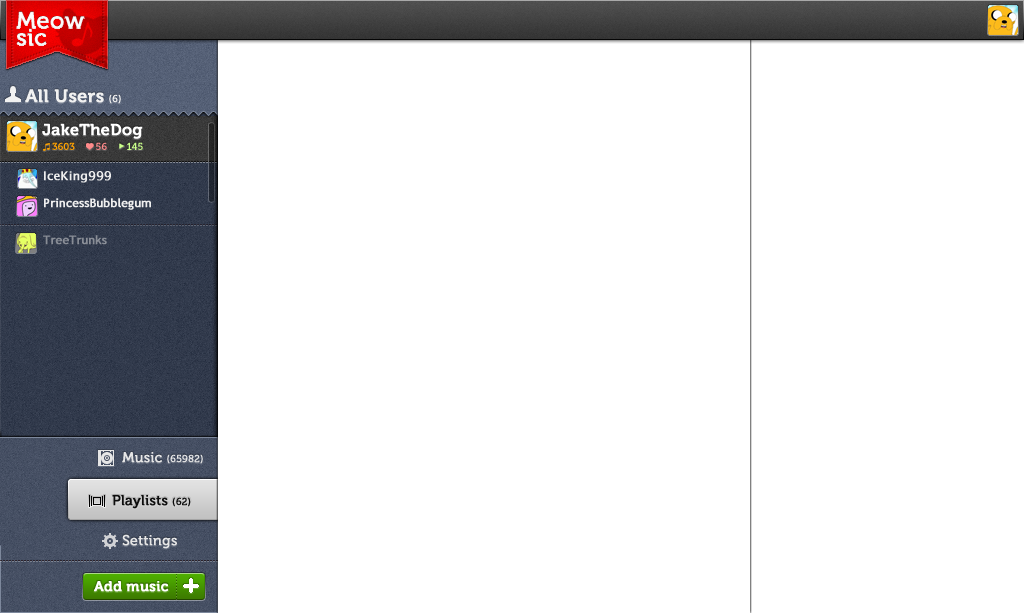
<style>
.page{position:relative;width:1024px;height:613px;background:#ffffff}
.page>*{position:absolute;margin:0}
.t1{font:23px/17px "Museo500-Regular";color:#f8f8f8;font-weight:bold}
.t2{font:18px "Museo700-Regular";color:#f1f1f1;font-weight:bold}
.t3{font:10px "Museo500-Regular";color:#f1f1f1;font-weight:bold}
.t4{font:16px "Museo700-Regular";color:#ffffff;font-weight:bold}
.t5{font:10px "Museo700-Regular";color:#ffa200}
.t6{font:10px "Museo700-Regular";color:#ff8a8a}
.t7{font:10px "Museo700-Regular";color:#c9ff8a}
.t8{font:12px "TrebuchetMS";color:#eeeeee;font-weight:bold}
.t9{font:12px "TrebuchetMS";color:#e0e0e0;font-weight:bold}
.t10{font:12px "TrebuchetMS";color:#898d96;font-weight:bold}
.t11{font:10px "Museo500-Regular";color:#e6e6e6;font-weight:bold}
.t12{font:14px "Museo500-Regular";color:#e6e6e6;font-weight:bold}
.t13{font:14px "Museo500-Regular";color:#000000;font-weight:bold}
.t14{font:10px "Museo500-Regular";color:#000000;font-weight:bold}
.t15{font:14px "Museo700-Regular";color:#ffffff;font-weight:bold}
</style>
<div class="page">
<p class="t1" style="left:16px;top:11px;width:69px;height:35px">Meow<br>sic</p>
<p class="t2" style="left:25px;top:89px;width:96px;height:15px">All Users <span class="t3">(6)</span></p>
<p class="t4" style="left:42px;top:123px;width:101px;height:16px">JakeTheDog</p>
<p class="t5" style="left:52px;top:142px;width:23px;height:8px">3603</p>
<p class="t6" style="left:96px;top:142px;width:11px;height:8px">56</p>
<p class="t7" style="left:127px;top:142px;width:16px;height:8px">145</p>
<p class="t8" style="left:44px;top:171px;width:67px;height:12px">IceKing999</p>
<p class="t9" style="left:44px;top:198px;width:107px;height:12px">PrincessBubblegum</p>
<p class="t10" style="left:43px;top:235px;width:64px;height:10px">TreeTrunks</p>
<p class="t11" style="left:122px;top:452px;width:81px;height:12px"><span class="t12">Music </span>(65982)</p>
<p class="t13" style="left:112px;top:495px;width:79px;height:14px">Playlists <span class="t14">(62)</span></p>
<p class="t13" style="left:112px;top:495px;width:79px;height:14px">Playlists <span class="t14">(62)</span></p>
<p class="t12" style="left:122px;top:534px;width:55px;height:15px">Settings</p>
<p class="t15" style="left:94px;top:581px;width:75px;height:11px">Add music</p>
</div>
